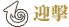
<style>
.page{position:relative;width:69px;height:27px;background:#ffffff}
.page>*{position:absolute;margin:0}
.t1{font:18px "RyuminPro-Heavy";color:#ae9442}
</style>
<div class="page">
<p class="t1" style="left:33px;top:4px;width:35px;height:18px">迎擊</p>
</div>
